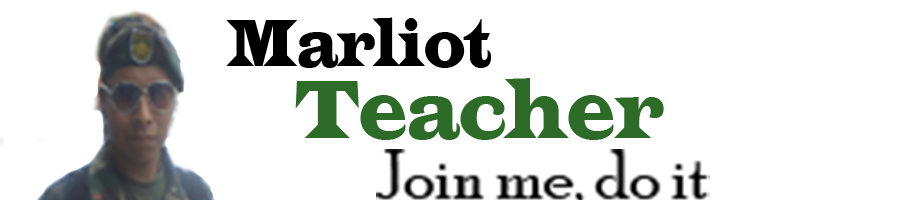
<style>
.page{position:relative;width:900px;height:200px;background:#ffffff}
.page>*{position:absolute;margin:0}
.t1{font:69.1px "LatinWide";color:#000000;scale:0.6 1}
.t2{font:86.4px "LatinWide";color:#2e6a28;scale:0.62 1}
</style>
<div class="page">
<p class="t1" style="left:226px;top:17px;width:265px;height:51px">Marliot</p>
<p class="t2" style="left:295px;top:78px;width:369px;height:62px">Teacher</p>
</div>
